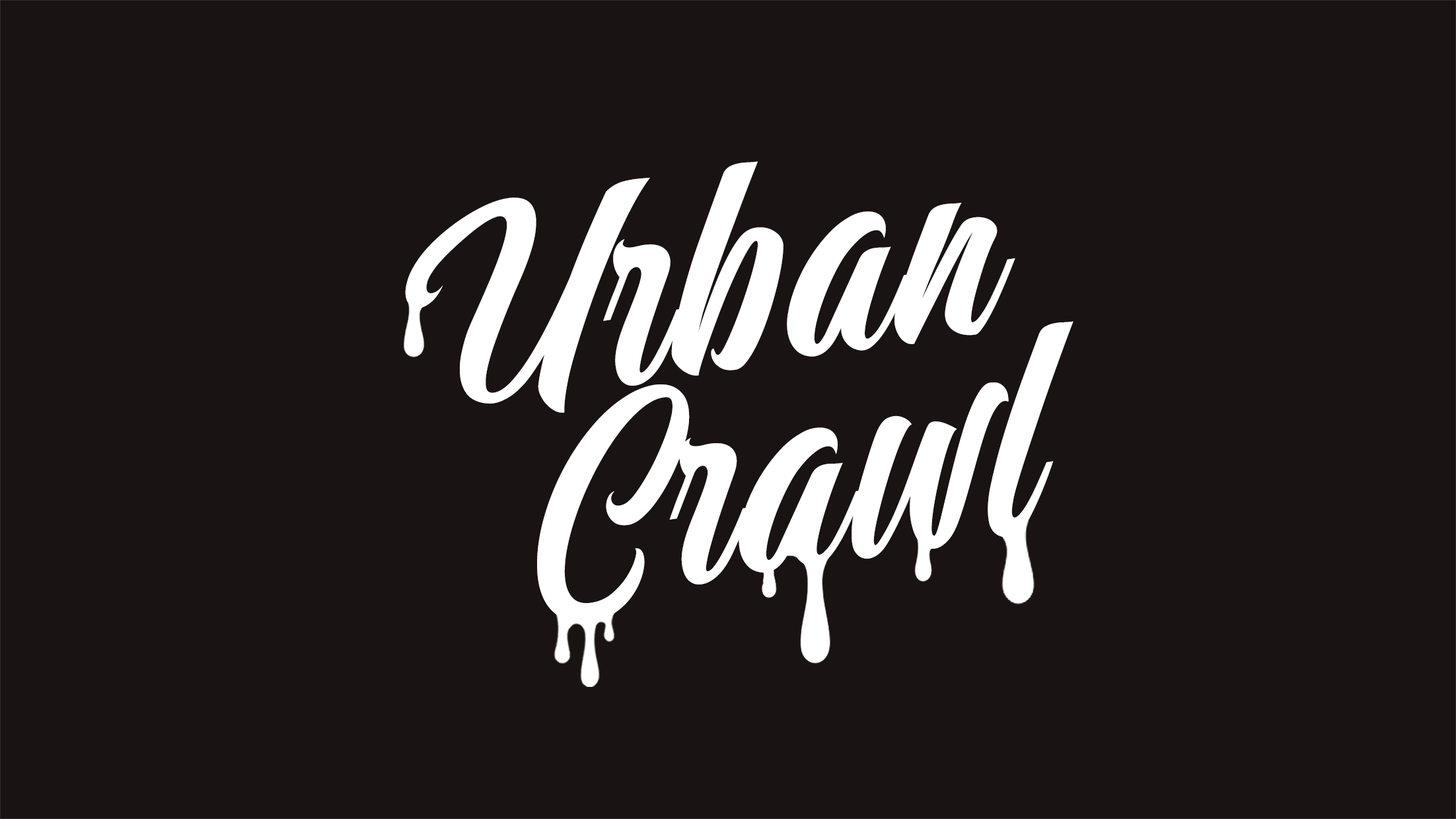
<style>
.page{position:relative;width:1456px;height:819px;background:#191313}
.page>*{position:absolute;margin:0}
.t1{font:250.6px/208.8px "Mueband";letter-spacing:0.01em;color:#ffffff}
</style>
<div class="page">
<p class="t1" style="left:405px;top:161px;width:668px;height:461px;rotate:-9deg">Urban<br>  Crawl</p>
</div>
